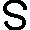
<style>
.page{position:relative;width:30px;height:30px;background:#ffffff}
.page>*{position:absolute;margin:0}
.t1{font:42px "ArialMT";color:#000000}
</style>
<div class="page">
<p class="t1" style="left:3px;top:0px;width:24px;height:31px;rotate:-180deg">S</p>
</div>
